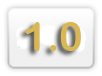
<style>
.page{position:relative;width:102px;height:76px}
.page>*{position:absolute;margin:0}
.t1{font:40px "ArialRoundedMTBold";color:#dab751}
</style>
<div class="page">
<p class="t1" style="left:25px;top:22px;width:56px;height:29px">1.0</p>
</div>
